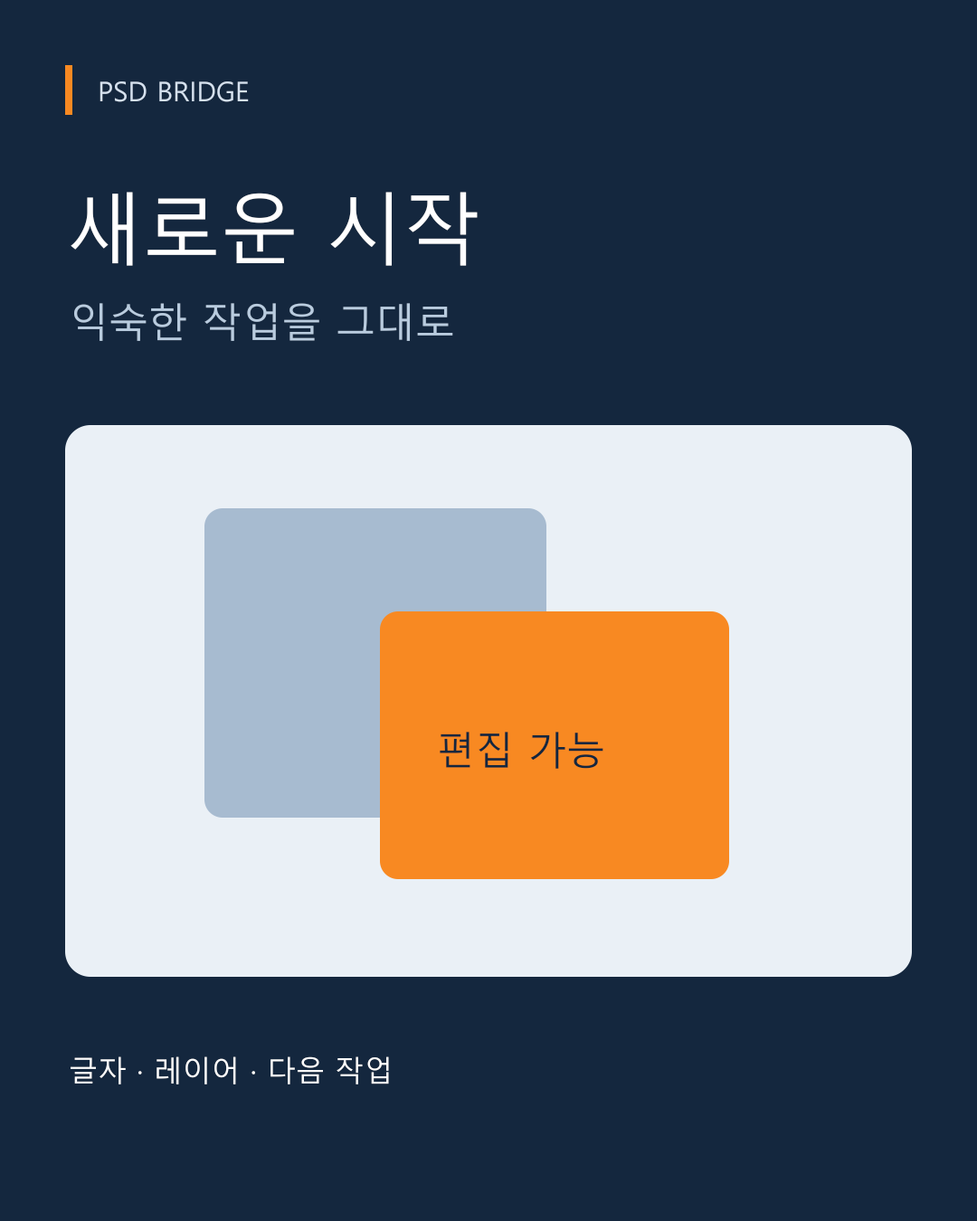
<style>
.page{position:relative;width:977px;height:1221px;background:#14273e}
.page>*{position:absolute;margin:0}
.t1{font:27.1px "MalgunGothic";color:#d5e1ef}
.t2{font:77.8px "MalgunGothic";color:#ffffff}
.t3{font:39.8px "MalgunGothic";color:#b9ccdf}
.t4{font:38.9px "MalgunGothic";color:#14273e}
.t5{font:28.9px "MalgunGothic";color:#ffffff}
</style>
<div class="page">
<p class="t1" style="left:99px;top:81px;width:151px;height:22px">PSD BRIDGE</p>
<p class="t2" style="left:70px;top:192px;width:408px;height:75px">새로운 시작</p>
<p class="t3" style="left:73px;top:303px;width:381px;height:39px">익숙한 작업을 그대로</p>
<p class="t4" style="left:439px;top:732px;width:165px;height:38px">편집 가능</p>
<p class="t5" style="left:70px;top:1056px;width:320px;height:29px">글자 · 레이어 · 다음 작업</p>
</div>
